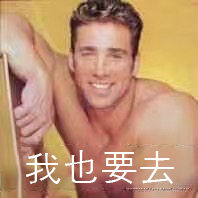
<style>
.page{position:relative;width:198px;height:198px}
.page>*{position:absolute;margin:0}
.t1{font:38px "AppleGothic";color:#ffffff}
</style>
<div class="page">
<p class="t1" style="left:25px;top:150px;width:149px;height:34px">我也要去</p>
</div>
